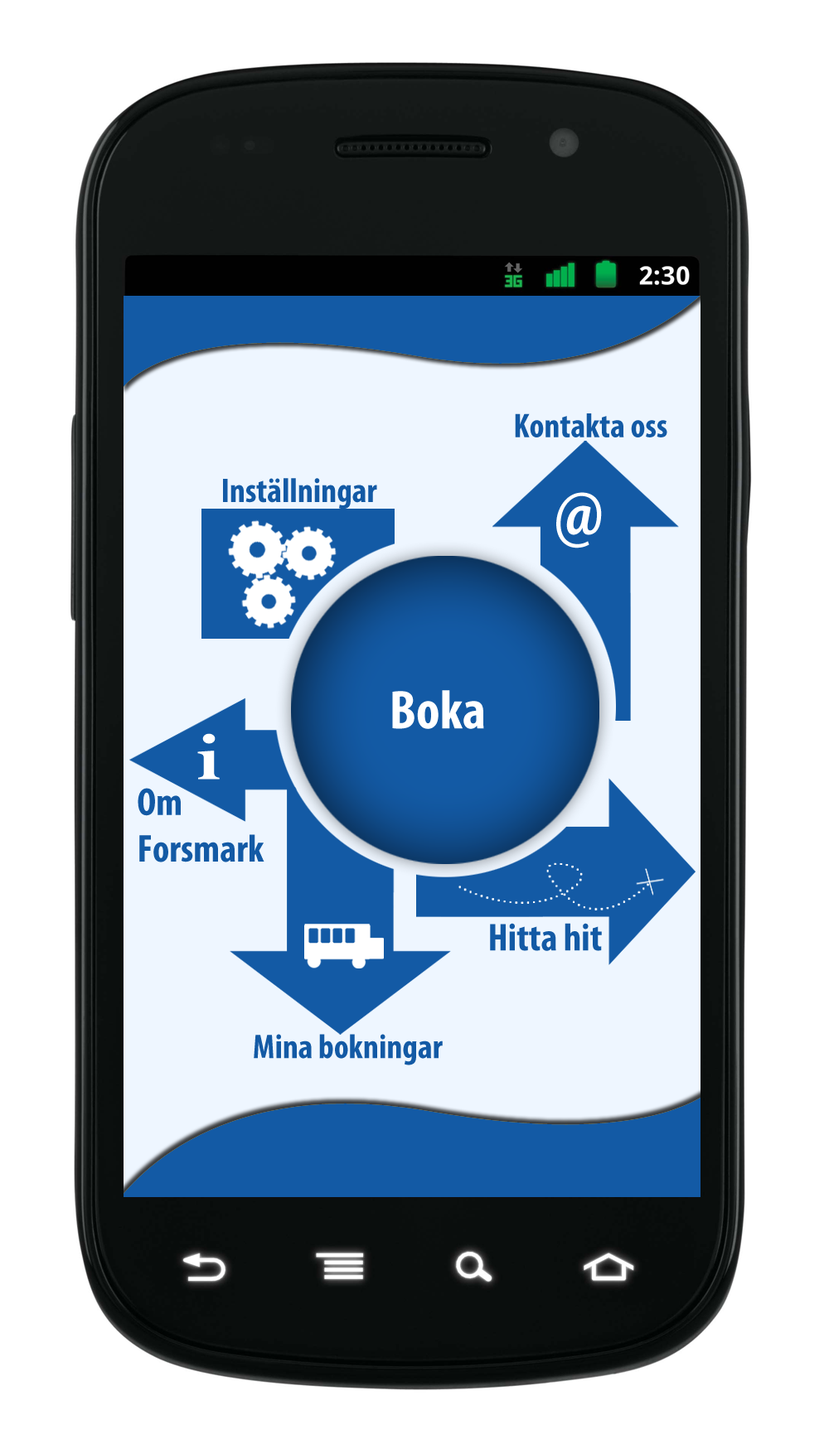
<style>
.page{position:relative;width:829px;height:1439px;background:#ffffff}
.page>*{position:absolute;margin:0}
.t1{font:34.5px "MyriadPro-BoldCond";color:#135aa5}
.t2{font:79.9px "MyriadPro-BoldCondIt";color:#ffffff}
.t3{font:55.1px "MyriadPro-BoldCond";color:#ffffff}
.t4{font:72px "Perpetua-Bold";color:#ffffff;scale:1.25 1}
.t5{font:39px "MyriadPro-BoldCond";color:#135aa5}
</style>
<div class="page">
<p class="t1" style="left:515px;top:413px;width:152px;height:24px">Kontakta oss</p>
<p class="t1" style="left:223px;top:478px;width:154px;height:32px">Inställningar</p>
<p class="t2" style="left:556px;top:492px;width:46px;height:56px">@</p>
<p class="t3" style="left:392px;top:690px;width:92px;height:39px">Boka</p>
<p class="t4" style="left:197px;top:733px;width:23px;height:47px">i</p>
<p class="t5" style="left:138px;top:788px;width:126px;height:75px">Om<br>Forsmark</p>
<p class="t5" style="left:490px;top:923px;width:112px;height:28px">Hitta hit</p>
<p class="t1" style="left:254px;top:1034px;width:188px;height:32px">Mina bokningar</p>
</div>
